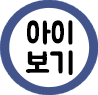
<style>
.page{position:relative;width:98px;height:95px;background:#ffffff}
.page>*{position:absolute;margin:0}
.t1{font:30px/30px "BMJUA";color:#000000}
</style>
<div class="page">
<p class="t1" style="left:25px;top:20px;width:48px;height:55px;text-align:center">아이<br>보기</p>
</div>
